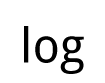
<style>
.page{position:relative;width:105px;height:83px;background:#ffffff}
.page>*{position:absolute;margin:0}
.t1{font:47.9px "DroidSans";color:#000000}
</style>
<div class="page">
<p class="t1" style="left:24px;top:26px;width:60px;height:48px">log</p>
</div>
